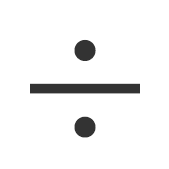
<style>
.page{position:relative;width:169px;height:169px;background:#ffffff}
.page>*{position:absolute;margin:0}
.t1{font:150px "KozGoPr6N-Regular";color:#333333;text-transform:uppercase}
</style>
<div class="page">
<p class="t1" style="left:30px;top:39px;width:110px;height:99px">÷</p>
</div>
